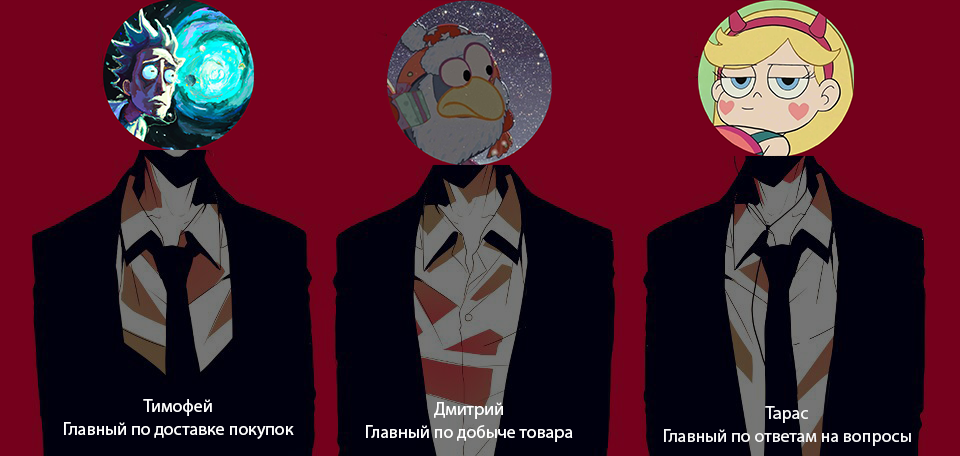
<style>
.page{position:relative;width:960px;height:456px;background:#75001c}
.page>*{position:absolute;margin:0}
.t1{font:18px/23px "MyriadPro-Regular";color:#ffffff}
.t2{font:18px/23px "MyriadPro-Regular";color:#f8f8f8}
</style>
<div class="page">
<p class="t1" style="left:64px;top:399px;width:230px;height:40px;text-align:center">Тимофей<br>Главный по доставке покупок</p>
<p class="t1" style="left:366px;top:402px;width:207px;height:40px;text-align:center">Дмитрий<br>Главный по добыче товара</p>
<p class="t2" style="left:664px;top:406px;width:247px;height:40px;text-align:center">Тарас<br>Главный по ответам на вопросы</p>
</div>
